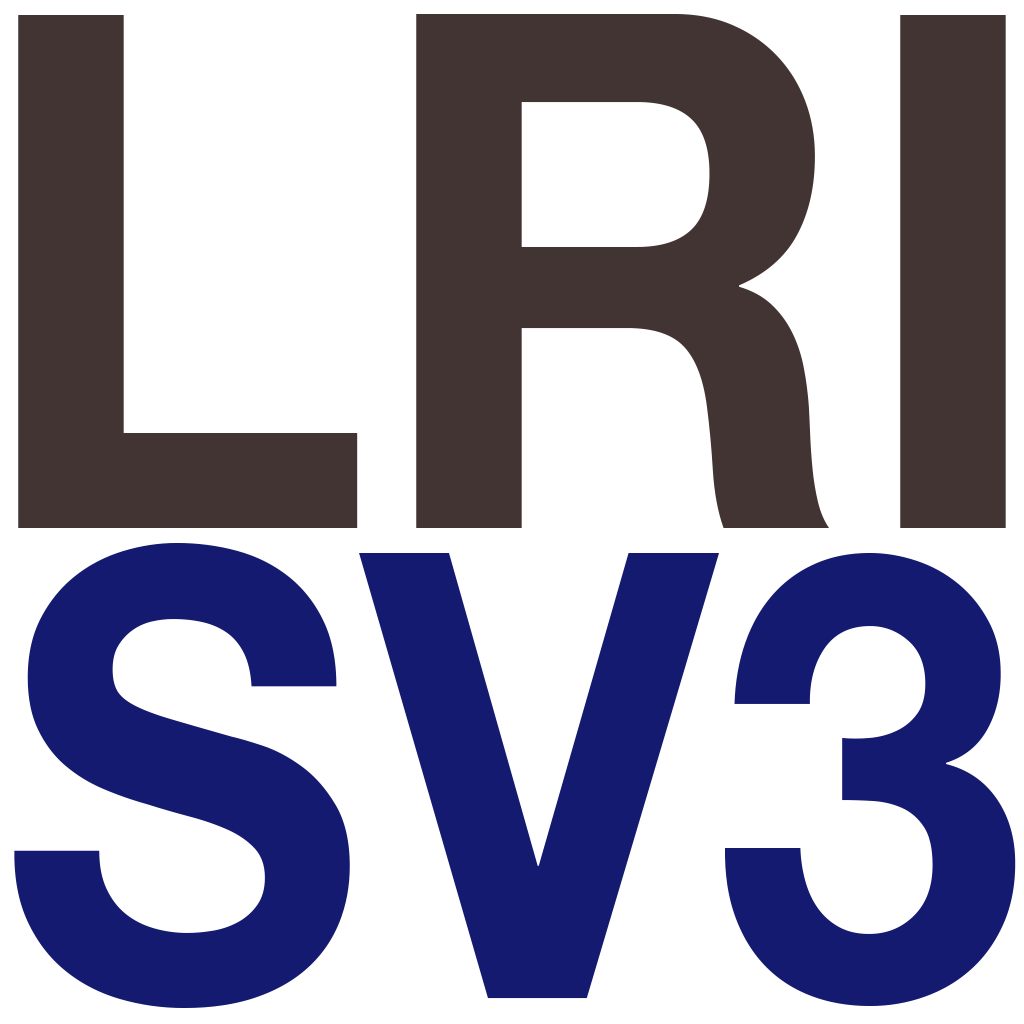
<style>
.page{position:relative;width:1024px;height:1024px;background:#ffffff}
.page>*{position:absolute;margin:0}
.t1{font:719px "HelveticaNeue-Bold";color:#433434;scale:0.93 1}
.t2{font:623.3px "HelveticaNeue-Bold";color:#141a6f;scale:0.9 1}
</style>
<div class="page">
<p class="t1" style="left:18px;top:14px;width:988px;height:514px">LRI</p>
<p class="t2" style="left:14px;top:543px;width:1002px;height:465px">SV3</p>
</div>
